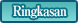
<style>
.page{position:relative;width:78px;height:23px;background:#115777}
.page>*{position:absolute;margin:0}
.t1{font:14px "RyuminPro-ExBold";letter-spacing:-0.08em;color:#ffffff;scale:0.9 1}
</style>
<div class="page">
<p class="t1" style="left:13px;top:5px;width:54px;height:14px">Ringkasan</p>
</div>
